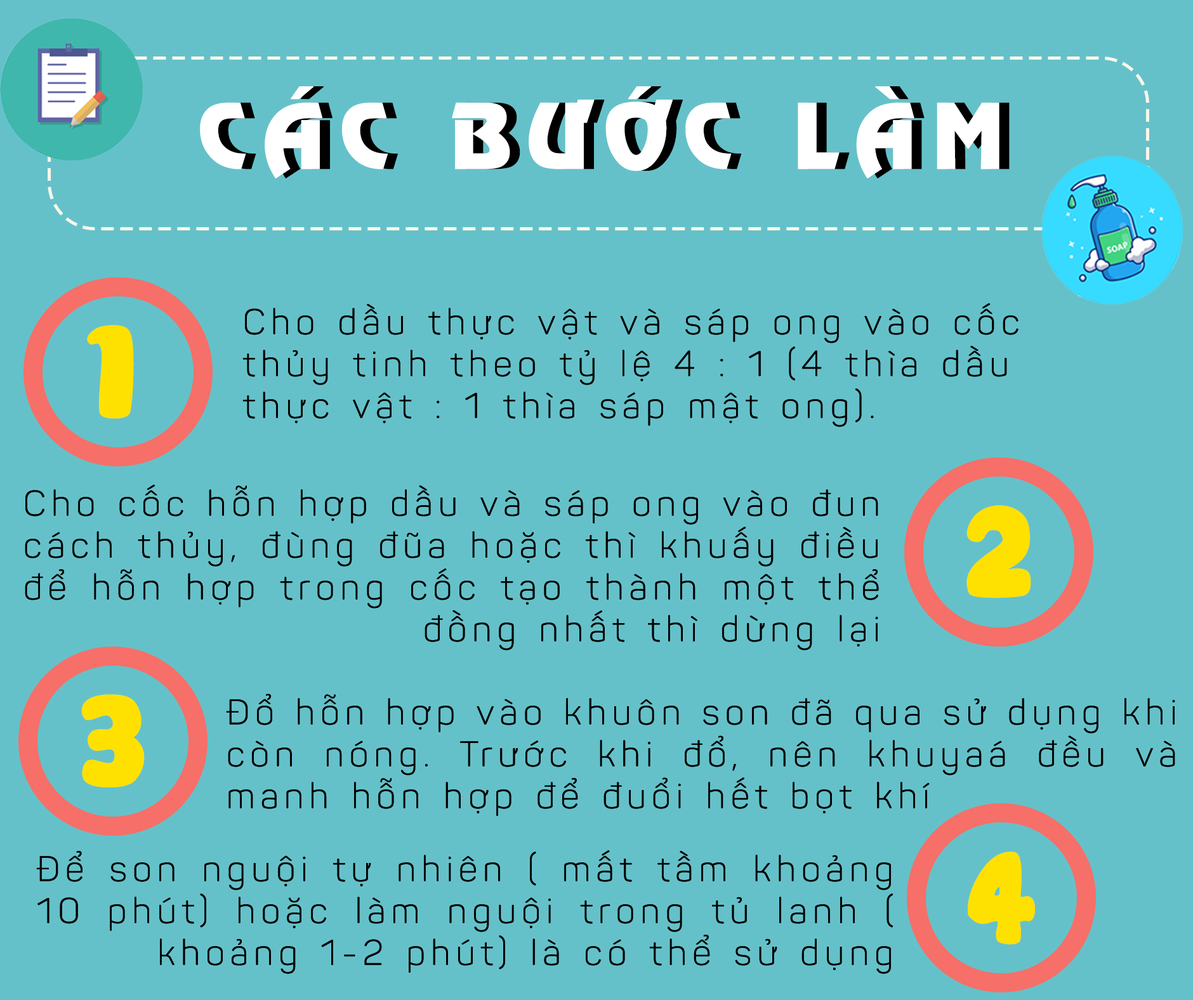
<style>
.page{position:relative;width:1193px;height:1000px;background:#65c1c9}
.page>*{position:absolute;margin:0}
.t1{font:88.8px "UVNNguyenDu";letter-spacing:0.14em;color:#ffffff;font-weight:bold}
.t2{font:34.9px "iCielPanton-Light";letter-spacing:0.14em;color:#000000;font-weight:bold}
.t3{font:126.9px "UTM-Cookies";letter-spacing:0.14em;color:#fee100;font-weight:bold}
</style>
<div class="page">
<p class="t1" style="left:200px;top:86px;width:799px;height:92px">CÁC BƯỚC LÀM</p>
<p class="t2" style="left:243px;top:303px;width:775px;height:124px">Cho dầu thực vật và sáp ong vào cốc thủy tinh theo tỷ lệ 4 : 1 (4 thìa dầu thực vật : 1 thìa sáp mật ong).</p>
<p class="t2" style="left:243px;top:303px;width:775px;height:124px">Cho dầu thực vật và sáp ong vào cốc thủy tinh theo tỷ lệ 4 : 1 (4 thìa dầu thực vật : 1 thìa sáp mật ong).</p>
<p class="t3" style="left:87px;top:325px;width:47px;height:94px">1</p>
<p class="t2" style="left:25px;top:485px;width:854px;height:165px;text-align:justify">Cho cốc hỗn hợp dầu và sáp ong vào đun cách thủy, đùng đũa hoặc thì khuấy điều để hỗn hợp trong cốc tạo thành một thể đồng nhất thì dừng lại</p>
<p class="t2" style="left:25px;top:485px;width:854px;height:165px;text-align:justify">Cho cốc hỗn hợp dầu và sáp ong vào đun cách thủy, đùng đũa hoặc thì khuấy điều để hỗn hợp trong cốc tạo thành một thể đồng nhất thì dừng lại</p>
<p class="t3" style="left:966px;top:505px;width:65px;height:93px">2</p>
<p class="t3" style="left:81px;top:694px;width:64px;height:93px">3</p>
<p class="t2" style="left:226px;top:693px;width:949px;height:123px;text-align:justify">Đổ hỗn hợp vào khuôn son đã qua sử dụng khi còn nóng. Trước khi đổ, nên khuyaá đều và manh hỗn hợp để đuổi hết bọt khí</p>
<p class="t2" style="left:226px;top:693px;width:949px;height:123px;text-align:justify">Đổ hỗn hợp vào khuôn son đã qua sử dụng khi còn nóng. Trước khi đổ, nên khuyaá đều và manh hỗn hợp để đuổi hết bọt khí</p>
<p class="t2" style="left:36px;top:850px;width:857px;height:124px;text-align:justify">Để son nguội tự nhiên ( mất tầm khoảng 10 phút) hoặc làm nguội trong tủ lanh ( khoảng 1-2 phút) là có thể sử dụng</p>
<p class="t2" style="left:36px;top:850px;width:857px;height:124px;text-align:justify">Để son nguội tự nhiên ( mất tầm khoảng 10 phút) hoặc làm nguội trong tủ lanh ( khoảng 1-2 phút) là có thể sử dụng</p>
<p class="t3" style="left:967px;top:851px;width:68px;height:94px">4</p>
</div>
